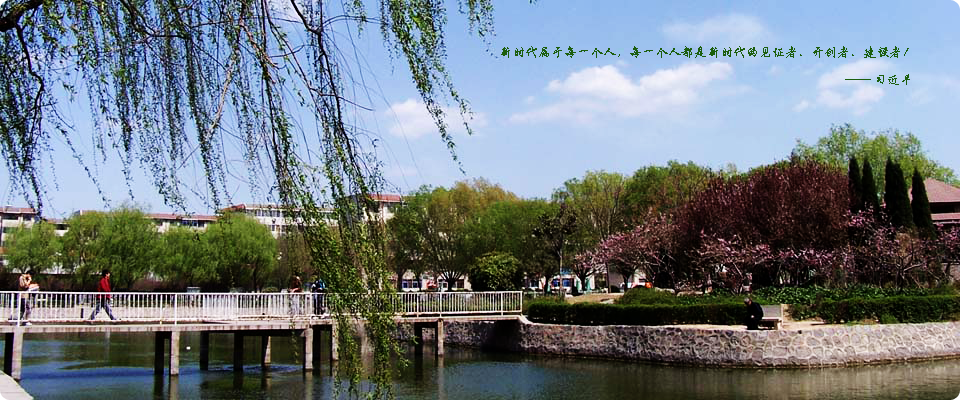
<style>
.page{position:relative;width:960px;height:400px}
.page>*{position:absolute;margin:0}
.t1{font:12.5px "STXingkai";color:#1c5e0d}
</style>
<div class="page">
<p class="t1" style="left:501px;top:46px;width:408px;height:12px">新时代属于每一个人，每一个人都是新时代的见证者、开创者、建设者！</p>
<p class="t1" style="left:845px;top:74px;width:65px;height:11px">—— 习近平</p>
</div>
